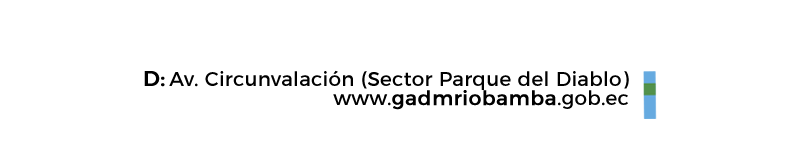
<style>
.page{position:relative;width:800px;height:150px;background:#ffffff}
.page>*{position:absolute;margin:0}
.t1{font:21.2px "Montserrat-Regular";letter-spacing:0.01em;color:#000000;font-weight:bold}
.t2{font:20px "Montserrat-Regular";letter-spacing:0.01em;color:#000000}
.t3{font:20px "Montserrat-Regular";letter-spacing:0.01em;color:#000000;font-weight:bold}
</style>
<div class="page">
<p class="t1" style="left:144px;top:71px;width:21px;height:16px">D:</p>
<p class="t2" style="left:169px;top:70px;width:460px;height:20px">Av. Circunvalación (Sector Parque del Diablo)</p>
<p class="t3" style="left:333px;top:90px;width:295px;height:20px"><span class="t2">www.</span>gadmriobamba<span class="t2">.gob.ec</span></p>
</div>
